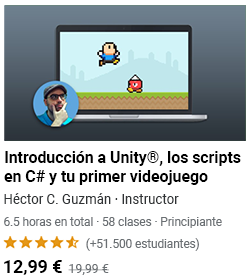
<style>
.page{position:relative;width:250px;height:280px;background:#ffffff}
.page>*{position:absolute;margin:0}
.t1{font:16.2px/19px "Roboto-Bold";color:#000000}
.t2{font:13.6px "Roboto-Regular";color:#303335}
.t3{font:12.1px "Roboto-Regular";color:#6a6f73;scale:0.97 1}
.t4{font:12px "Roboto-Regular";color:#6a6f73}
.t5{font:18.3px "Roboto-Bold";color:#000000;scale:0.97 1}
.t6{font:12.8px "Roboto-Regular";color:#6a6f73}
</style>
<div class="page">
<p class="t1" style="left:4px;top:151px;width:237px;height:34px">Introducción a Unity®, los scripts en C# y tu primer videojuego</p>
<p class="t2" style="left:4px;top:193px;width:175px;height:11px">Héctor C. Guzmán · Instructor</p>
<p class="t3" style="left:4px;top:217px;width:218px;height:11px">6.5 horas en total · 58 clases · Principiante</p>
<p class="t4" style="left:86px;top:238px;width:113px;height:13px">(+51.500 estudiantes)</p>
<p class="t5" style="left:4px;top:260px;width:58px;height:15px">12,99 €</p>
<p class="t6" style="left:68px;top:264px;width:41px;height:11px">19,99 €</p>
</div>
